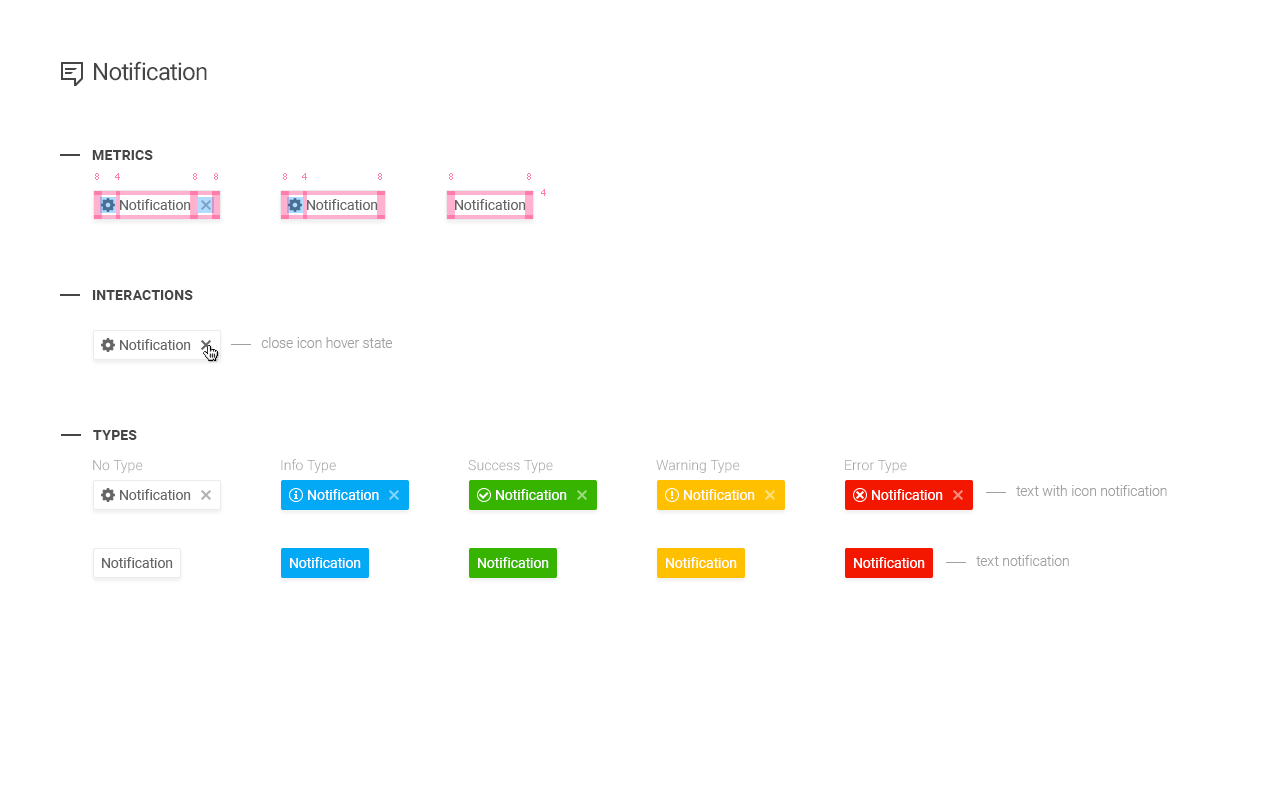
<style>
.page{position:relative;width:1280px;height:800px;background:#ffffff}
.page>*{position:absolute;margin:0}
.t1{font:24px "Roboto-Regular";letter-spacing:-0.025em;color:#454545}
.t2{font:14px "Roboto-Bold";letter-spacing:0.01em;color:#454545;text-transform:uppercase}
.t3{font:9px "Tahoma";color:#ff7cae}
.t4{font:14px "Roboto-Regular";color:#656565}
.t5{font:14px "Roboto-Light";color:#a1a1a1}
.t6{font:14px "Roboto-Light";letter-spacing:0.01em;color:#a1a1a1}
.t7{font:14px "Roboto-Regular";color:#ffffff}
</style>
<div class="page">
<p class="t1" style="left:94px;top:61px;width:113px;height:20px">Notification</p>
<p class="t2" style="left:92px;top:150px;width:61px;height:10px">Metrics</p>
<p class="t3" style="left:95px;top:173px;width:4px;height:7px">8</p>
<p class="t3" style="left:115px;top:173px;width:5px;height:7px">4</p>
<p class="t3" style="left:193px;top:173px;width:4px;height:7px">8</p>
<p class="t3" style="left:214px;top:173px;width:4px;height:7px">8</p>
<p class="t3" style="left:283px;top:173px;width:4px;height:7px">8</p>
<p class="t3" style="left:302px;top:173px;width:5px;height:7px">4</p>
<p class="t3" style="left:378px;top:173px;width:4px;height:7px">8</p>
<p class="t3" style="left:449px;top:173px;width:4px;height:7px">8</p>
<p class="t3" style="left:527px;top:173px;width:4px;height:7px">8</p>
<p class="t3" style="left:541px;top:189px;width:5px;height:7px">4</p>
<p class="t4" style="left:120px;top:199px;width:71px;height:11px">Notification</p>
<p class="t4" style="left:307px;top:199px;width:71px;height:11px">Notification</p>
<p class="t4" style="left:455px;top:199px;width:71px;height:11px">Notification</p>
<p class="t2" style="left:92px;top:290px;width:101px;height:10px">Interactions</p>
<p class="t4" style="left:120px;top:339px;width:71px;height:11px">Notification</p>
<p class="t5" style="left:261px;top:337px;width:132px;height:11px">close icon hover state</p>
<p class="t2" style="left:93px;top:430px;width:44px;height:10px">types</p>
<p class="t6" style="left:93px;top:460px;width:50px;height:13px">No Type</p>
<p class="t6" style="left:281px;top:459px;width:55px;height:14px">Info Type</p>
<p class="t6" style="left:468px;top:460px;width:85px;height:13px">Success Type</p>
<p class="t6" style="left:656px;top:460px;width:84px;height:13px">Warning Type</p>
<p class="t6" style="left:845px;top:460px;width:62px;height:13px">Error Type</p>
<p class="t5" style="left:1016px;top:485px;width:151px;height:11px">text with icon notification</p>
<p class="t4" style="left:120px;top:489px;width:71px;height:11px">Notification</p>
<p class="t7" style="left:308px;top:489px;width:71px;height:11px">Notification</p>
<p class="t7" style="left:496px;top:489px;width:71px;height:11px">Notification</p>
<p class="t7" style="left:684px;top:489px;width:71px;height:11px">Notification</p>
<p class="t7" style="left:872px;top:489px;width:71px;height:11px">Notification</p>
<p class="t4" style="left:102px;top:557px;width:71px;height:11px">Notification</p>
<p class="t7" style="left:290px;top:557px;width:71px;height:11px">Notification</p>
<p class="t7" style="left:478px;top:557px;width:71px;height:11px">Notification</p>
<p class="t7" style="left:666px;top:557px;width:71px;height:11px">Notification</p>
<p class="t7" style="left:854px;top:557px;width:71px;height:11px">Notification</p>
<p class="t5" style="left:976px;top:555px;width:93px;height:11px">text notification</p>
</div>
